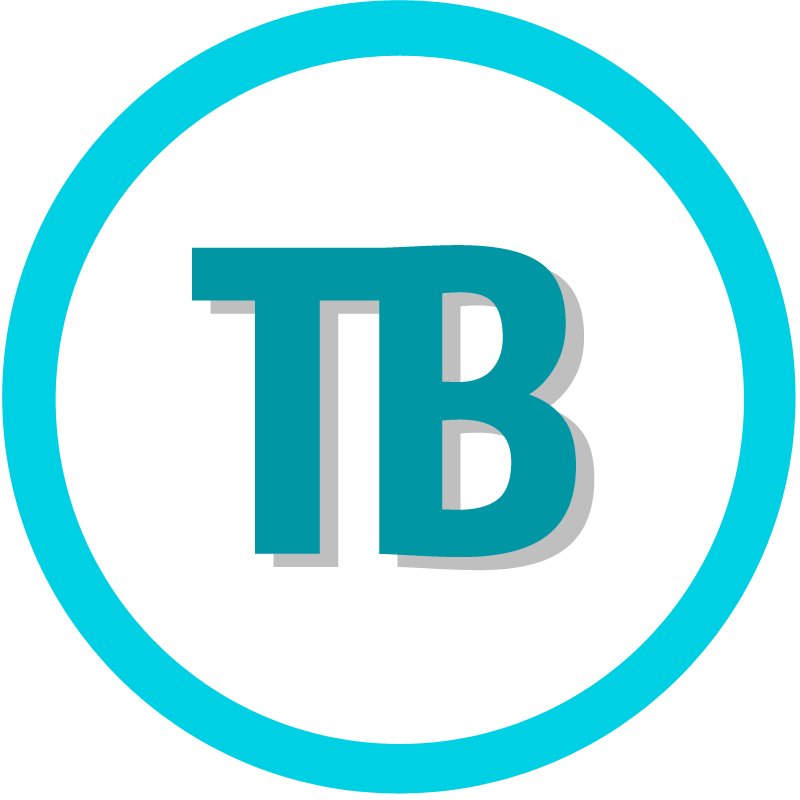
<style>
.page{position:relative;width:800px;height:800px;background:#ffffff}
.page>*{position:absolute;margin:0}
.t1{font:464.6px "SansusWebissimo";letter-spacing:-0.085em;color:#0096a3}
</style>
<div class="page">
<p class="t1" style="left:192px;top:245px;width:384px;height:312px">TB</p>
<p class="t1" style="left:210px;top:258px;width:385px;height:313px">TB</p>
</div>
